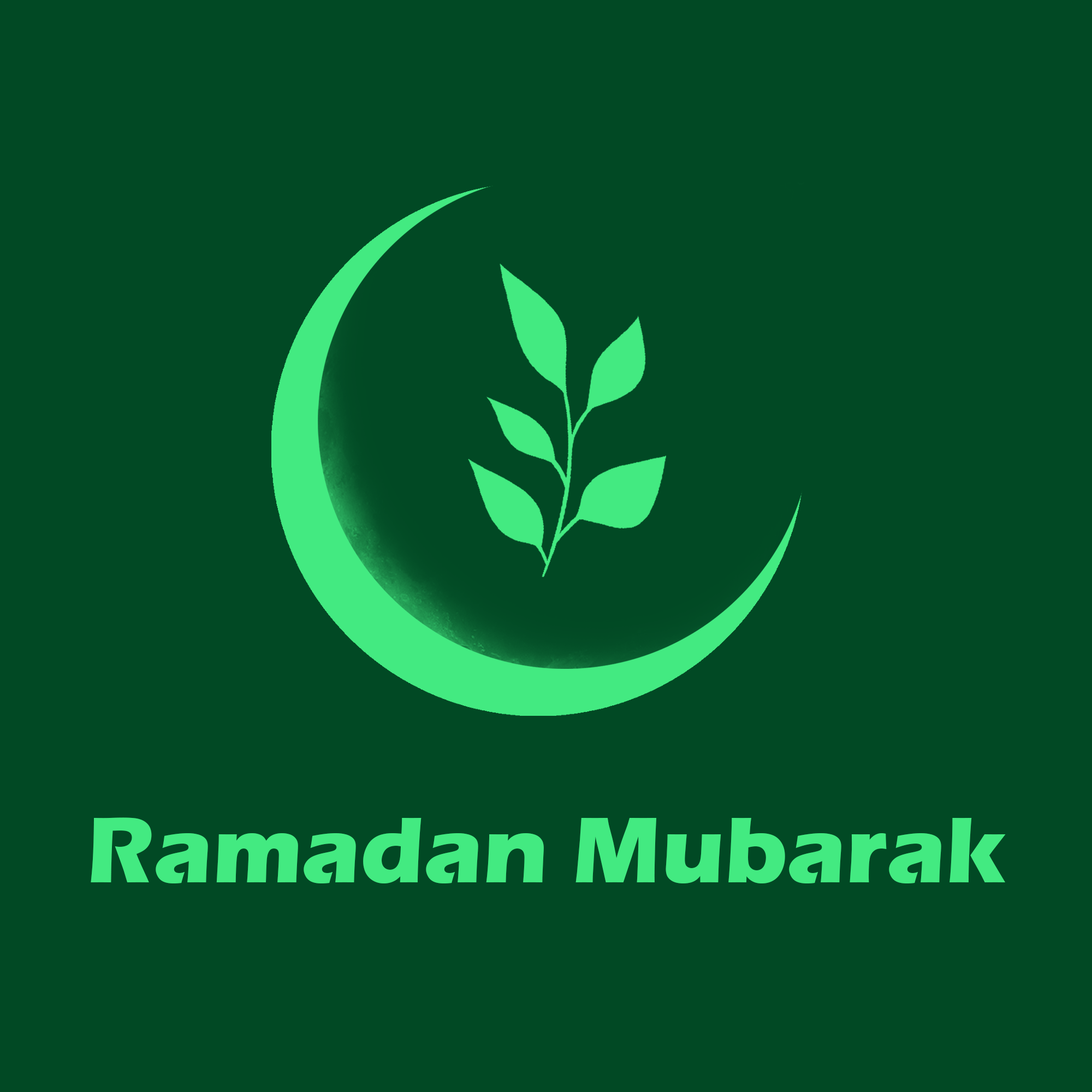
<style>
.page{position:relative;width:1092px;height:1092px;background:#014924}
.page>*{position:absolute;margin:0}
.t1{font:96.5px "ErasITC-Bold";color:#43ea81}
</style>
<div class="page">
<p class="t1" style="left:91px;top:817px;width:915px;height:66px">Ramadan Mubarak</p>
</div>
